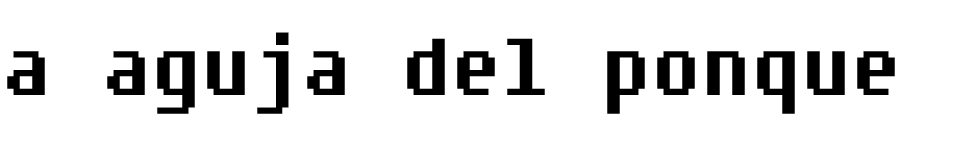
<style>
.page{position:relative;width:960px;height:164px;background:#ffffff}
.page>*{position:absolute;margin:0}
.t1{font:100px "FixedsysExcelsiorIIIb";color:#000000}
</style>
<div class="page">
<p class="t1" style="left:7px;top:32px;width:888px;height:82px">a aguja del ponque</p>
</div>
